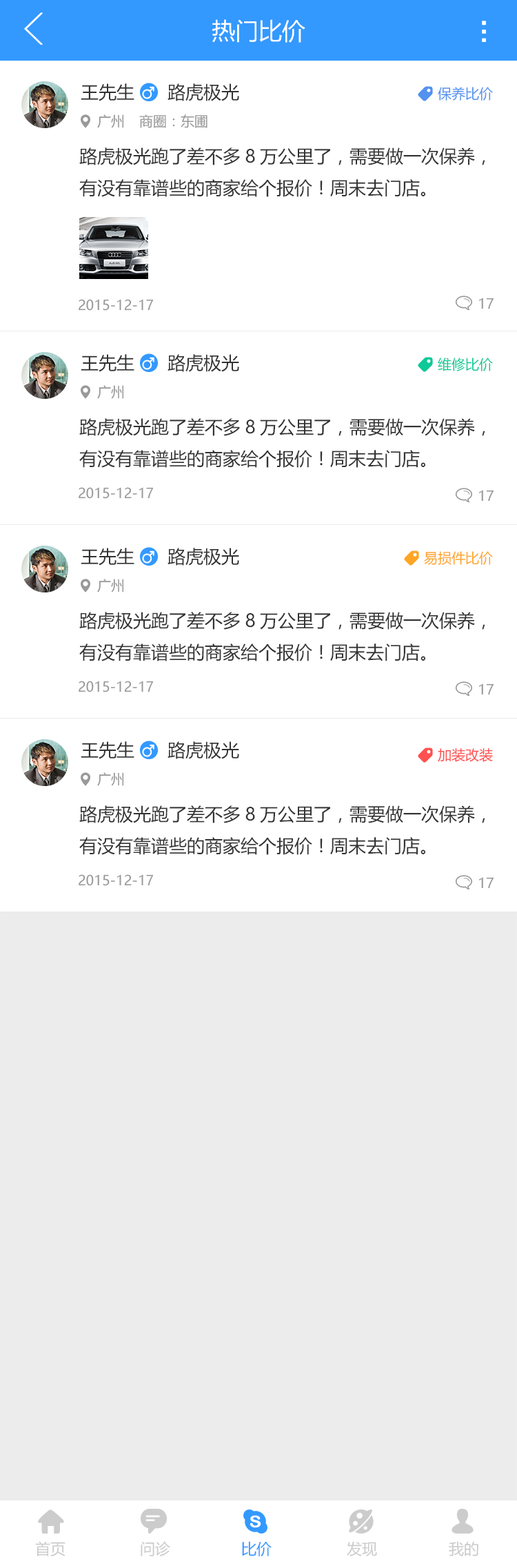
<style>
.page{position:relative;width:517px;height:1568px;background:#ffffff}
.page>*{position:absolute;margin:0}
.t1{font:23.4px "MicrosoftYaHei";color:#ffffff}
.t2{font:17.9px "MicrosoftYaHei";color:#333333}
.t3{font:13.8px "MicrosoftYaHei";color:#5392ef}
.t4{font:13.8px "MicrosoftYaHei";color:#999999}
.t5{font:13.8px "MicrosoftYaHei";color:#0fc997}
.t6{font:13.8px "MicrosoftYaHei";color:#ffa525}
.t7{font:13.8px "MicrosoftYaHei";color:#ff5050}
.t8{font:15.2px "MicrosoftYaHei";color:#cccccc}
.t9{font:15.2px "MicrosoftYaHei";color:#3399ff}
</style>
<div class="page">
<p class="t1" style="left:212px;top:19px;width:93px;height:24px">热门比价</p>
<p class="t2" style="left:81px;top:83px;width:53px;height:18px">王先生</p>
<p class="t2" style="left:167px;top:83px;width:72px;height:18px">路虎极光</p>
<p class="t3" style="left:437px;top:87px;width:56px;height:14px">保养比价</p>
<p class="t4" style="left:97px;top:114px;width:27px;height:14px">广州</p>
<p class="t4" style="left:139px;top:114px;width:68px;height:14px">商圈：东圃</p>
<p class="t2" style="left:79px;top:147px;width:406px;height:50px">路虎极光跑了差不多8万公里了，需要做一次保养，<br>有没有靠谱些的商家给个报价！周末去门店。</p>
<p class="t4" style="left:79px;top:299px;width:75px;height:12px">2015-12-17</p>
<p class="t4" style="left:479px;top:298px;width:15px;height:11px">17</p>
<p class="t2" style="left:81px;top:354px;width:53px;height:18px">王先生</p>
<p class="t2" style="left:167px;top:354px;width:72px;height:18px">路虎极光</p>
<p class="t5" style="left:437px;top:358px;width:56px;height:13px">维修比价</p>
<p class="t4" style="left:97px;top:385px;width:27px;height:14px">广州</p>
<p class="t2" style="left:79px;top:418px;width:406px;height:50px">路虎极光跑了差不多8万公里了，需要做一次保养，<br>有没有靠谱些的商家给个报价！周末去门店。</p>
<p class="t4" style="left:79px;top:487px;width:75px;height:12px">2015-12-17</p>
<p class="t4" style="left:479px;top:490px;width:15px;height:12px">17</p>
<p class="t2" style="left:81px;top:548px;width:53px;height:18px">王先生</p>
<p class="t2" style="left:167px;top:548px;width:72px;height:18px">路虎极光</p>
<p class="t6" style="left:424px;top:551px;width:69px;height:14px">易损件比价</p>
<p class="t4" style="left:97px;top:579px;width:27px;height:13px">广州</p>
<p class="t2" style="left:79px;top:612px;width:406px;height:49px">路虎极光跑了差不多8万公里了，需要做一次保养，<br>有没有靠谱些的商家给个报价！周末去门店。</p>
<p class="t4" style="left:79px;top:681px;width:75px;height:11px">2015-12-17</p>
<p class="t4" style="left:479px;top:683px;width:15px;height:12px">17</p>
<p class="t2" style="left:81px;top:741px;width:53px;height:18px">王先生</p>
<p class="t2" style="left:167px;top:741px;width:72px;height:18px">路虎极光</p>
<p class="t7" style="left:437px;top:748px;width:56px;height:14px">加装改装</p>
<p class="t4" style="left:97px;top:772px;width:27px;height:14px">广州</p>
<p class="t2" style="left:79px;top:805px;width:406px;height:50px">路虎极光跑了差不多8万公里了，需要做一次保养，<br>有没有靠谱些的商家给个报价！周末去门店。</p>
<p class="t4" style="left:79px;top:874px;width:75px;height:12px">2015-12-17</p>
<p class="t4" style="left:479px;top:877px;width:15px;height:12px">17</p>
<p class="t8" style="left:35px;top:1541px;width:30px;height:15px">首页</p>
<p class="t8" style="left:141px;top:1541px;width:29px;height:15px">问诊</p>
<p class="t9" style="left:242px;top:1541px;width:29px;height:15px">比价</p>
<p class="t8" style="left:347px;top:1541px;width:30px;height:15px">发现</p>
<p class="t8" style="left:448px;top:1541px;width:30px;height:15px">我的</p>
</div>
